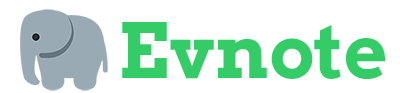
<style>
.page{position:relative;width:400px;height:93px;background:#ffffff}
.page>*{position:absolute;margin:0}
.t1{font:75.8px "Arvo-Bold";color:#33cc66}
</style>
<div class="page">
<p class="t1" style="left:122px;top:22px;width:263px;height:57px">Evnote</p>
</div>
